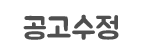
<style>
.page{position:relative;width:146px;height:53px;background:#ffffff}
.page>*{position:absolute;margin:0}
.t1{font:30.1px "BMJUA";color:#4f4f4f}
</style>
<div class="page">
<p class="t1" style="left:23px;top:14px;width:96px;height:26px">공고수정</p>
</div>
